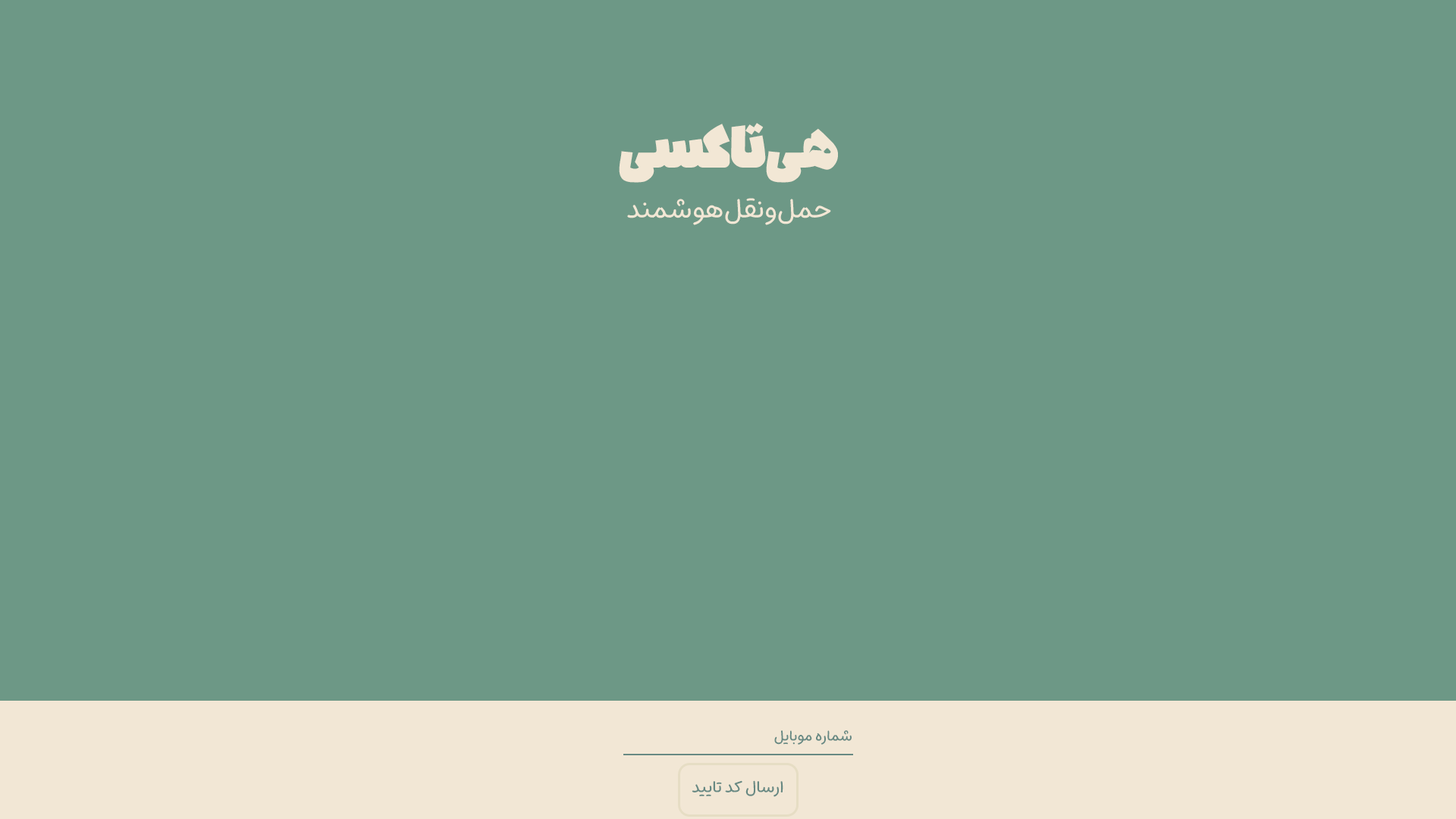
<style>
.page{position:relative;width:1456px;height:819px;background:#6d9886}
.page>*{position:absolute;margin:0}
.t1{font:72.8px "PlasmaLozengeDots-Bold";color:#f2e7d5}
.t2{font:28.1px "MikhakVF-Regular";color:#f2e7d5}
.t3{font:15.2px "MikhakVF-Regular";color:#678983}
.t4{font:17px "MikhakVF-Regular";color:#678983}
</style>
<div class="page">
<p class="t1" style="left:619px;top:123px;width:219px;height:60px">هی‌تاکسی</p>
<p class="t2" style="left:627px;top:198px;width:204px;height:27px">حمل‌ونقل‌هوشمند</p>
<p class="t3" style="left:774px;top:730px;width:78px;height:15px">شماره موبایل</p>
<p class="t4" style="left:692px;top:780px;width:91px;height:17px">ارسال کد تایید</p>
</div>
